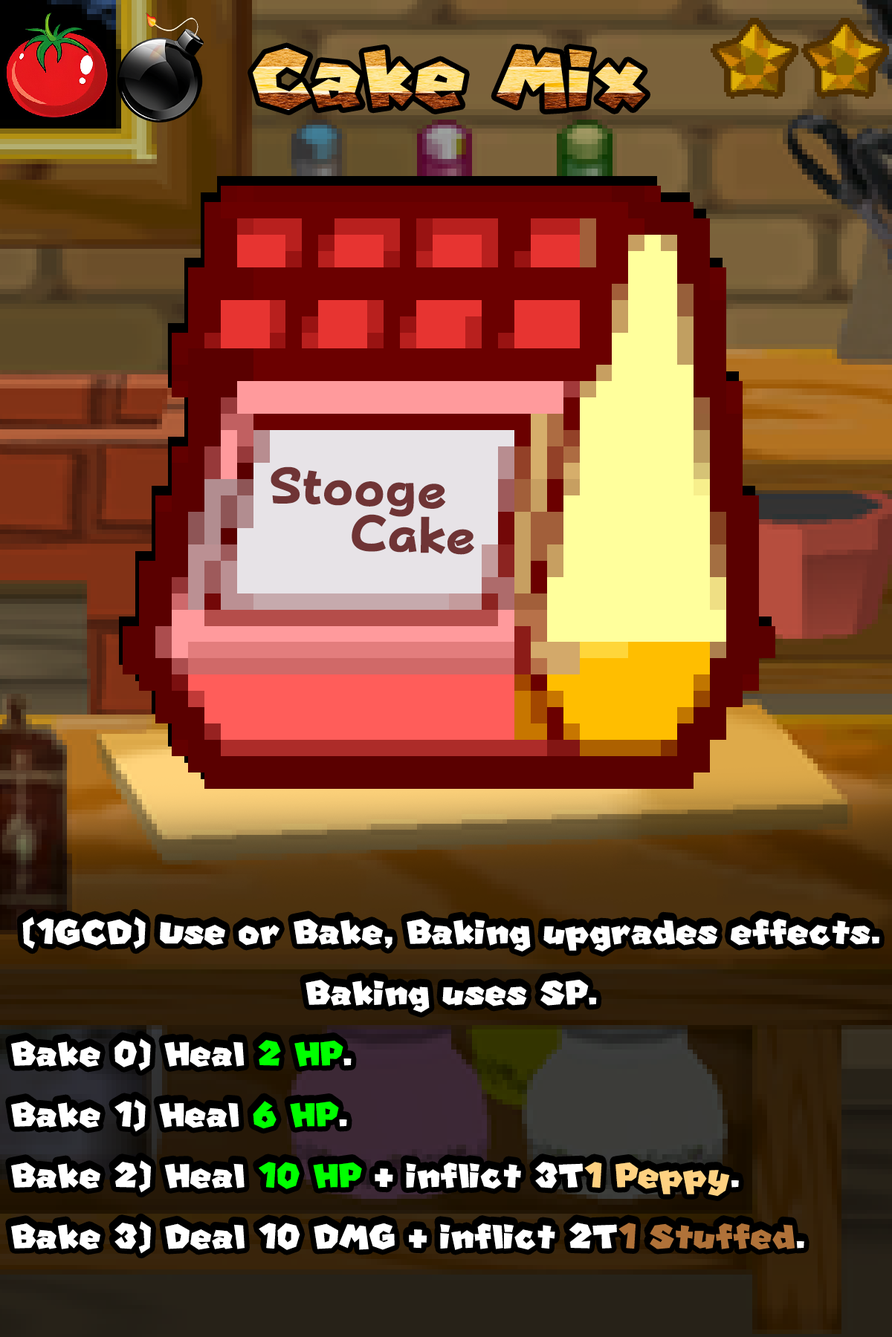
<style>
.page{position:relative;width:892px;height:1337px}
.page>*{position:absolute;margin:0}
.t1{font:189.5px "SuperMario"}
.t2{font:86.1px/44.5px "FOT-PopHappinessStd-EB";color:#6f3435}
.t3{font:79.5px/60.9px "SuperMario";color:#ffffff}
.t4{font:79.5px/60.9px "SuperMario";color:#00ff00}
.t5{font:79.5px/60.9px "SuperMario";color:#fed181}
.t6{font:79.5px/60.9px "SuperMario";color:#b07239}
</style>
<div class="page">
<p class="t1" style="left:253px;top:48px;width:393px;height:63px">Cake Mix</p>
<p class="t2" style="left:270px;top:467px;width:204px;height:88px;text-align:center;rotate:2deg">Stooge <br>      Cake</p>
<p class="t3" style="left:11px;top:917px;width:868px;height:337px;text-align:center">(1GCD) Use or Bake, Baking upgrades effects. Baking uses SP.<br>Bake 0) Heal <span class="t4">2 HP</span>.<br>Bake 1) Heal <span class="t4">6 HP</span>.<br>Bake 2) Heal <span class="t4">10 HP</span> + inflict 3T<span class="t5">1 Peppy</span>.<br>Bake 3) Deal 10 DMG + inflict 2T<span class="t6">1 Stuffed</span>.</p>
</div>
